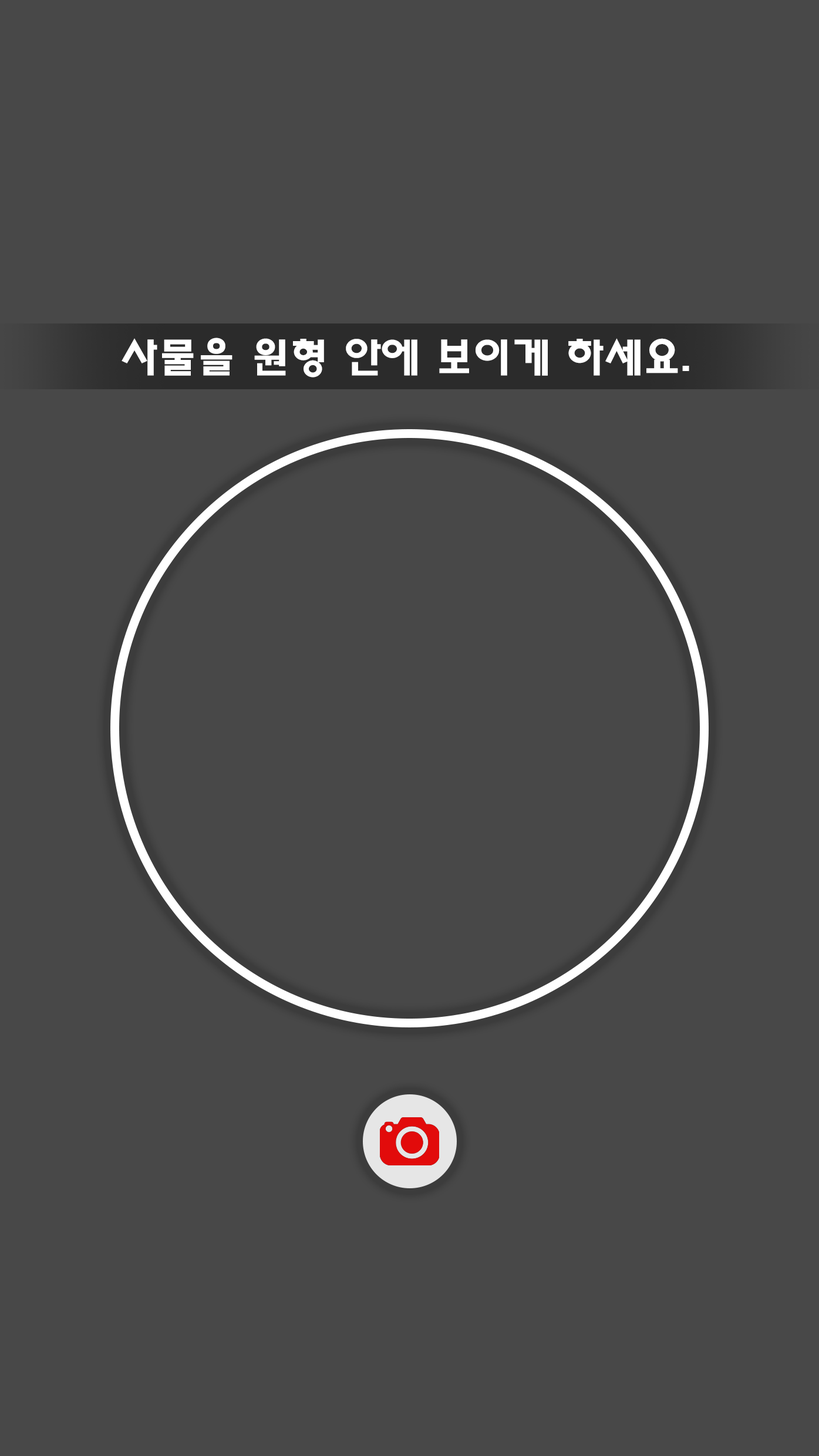
<style>
.page{position:relative;width:819px;height:1456px;background:#484848}
.page>*{position:absolute;margin:0}
.t1{font:40.6px "HaanYHeadM";color:#ffffff;scale:1.12 1}
</style>
<div class="page">
<p class="t1" style="left:122px;top:338px;width:567px;height:39px">사물을 원형 안에 보이게 하세요.</p>
</div>
